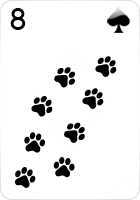
<style>
.page{position:relative;width:140px;height:200px;background:#ffffff}
.page>*{position:absolute;margin:0}
.t1{font:26px "CardCharacters";color:#000000}
</style>
<div class="page">
<p class="t1" style="left:10px;top:8px;width:16px;height:22px">8</p>
</div>
